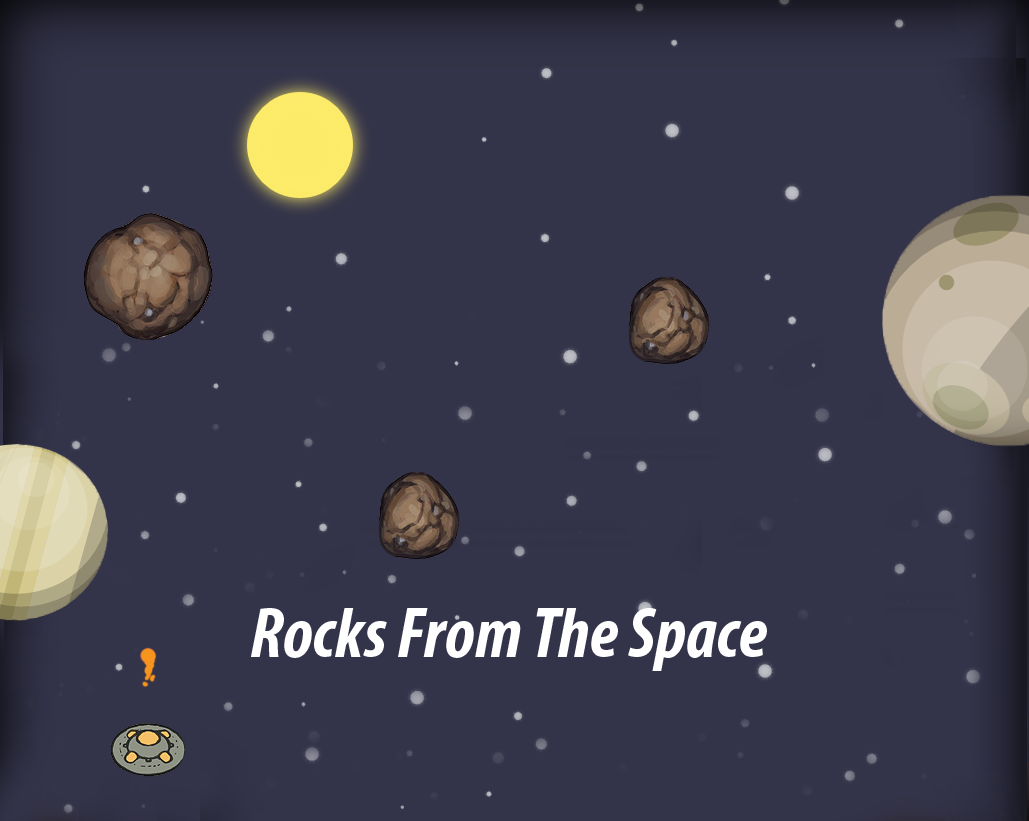
<style>
.page{position:relative;width:1029px;height:821px;background:#333349}
.page>*{position:absolute;margin:0}
.t1{font:72px "MyriadPro-BoldCondIt";color:#ffffff}
</style>
<div class="page">
<p class="t1" style="left:251px;top:608px;width:516px;height:63px">Rocks From The Space</p>
</div>
